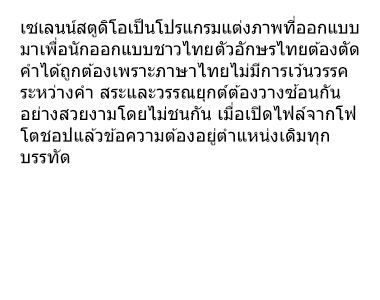
<style>
.page{position:relative;width:380px;height:300px;background:#ffffff}
.page>*{position:absolute;margin:0}
.t1{font:18px "Tahoma";color:#000000}
</style>
<div class="page">
<p class="t1" style="left:20px;top:15px;width:339px;height:149px">เซเลนน์สตูดิโอเป็นโปรแกรมแต่งภาพที่ออกแบบมาเพื่อนักออกแบบชาวไทย ตัวอักษรไทยต้องตัดคำได้ถูกต้องเพราะภาษาไทยไม่มีการเว้นวรรคระหว่างคำ สระและวรรณยุกต์ต้องวางซ้อนกันอย่างสวยงามโดยไม่ชนกัน เมื่อเปิดไฟล์จากโฟโตชอปแล้วข้อความต้องอยู่ตำแหน่งเดิมทุกบรรทัด</p>
</div>
